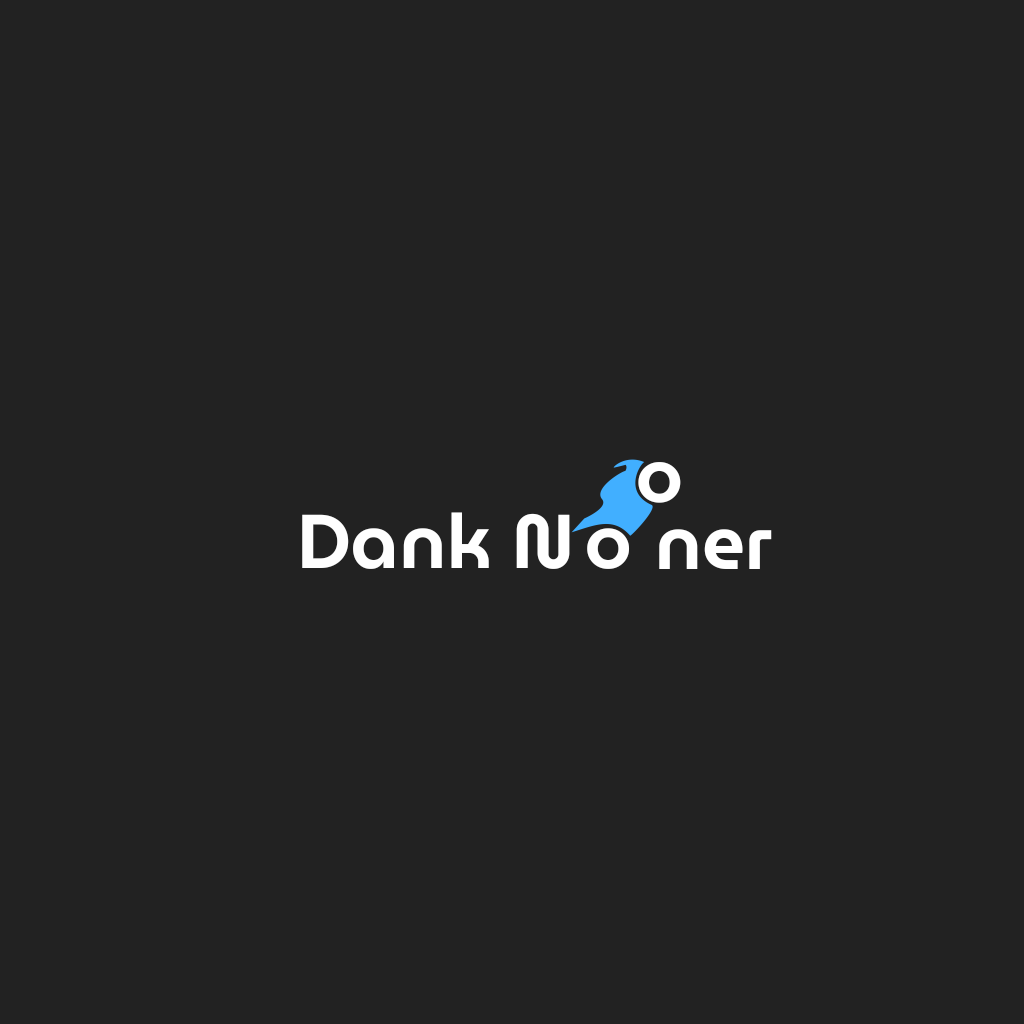
<style>
.page{position:relative;width:1024px;height:1024px;background:#222222}
.page>*{position:absolute;margin:0}
.t1{font:76px "MuseoModerno-SemiBold";color:#ffffff}
</style>
<div class="page">
<p class="t1" style="left:637px;top:462px;width:45px;height:42px">o</p>
<p class="t1" style="left:301px;top:512px;width:270px;height:58px">Dank N</p>
<p class="t1" style="left:586px;top:528px;width:45px;height:42px">o</p>
<p class="t1" style="left:658px;top:529px;width:115px;height:41px">ner</p>
</div>
